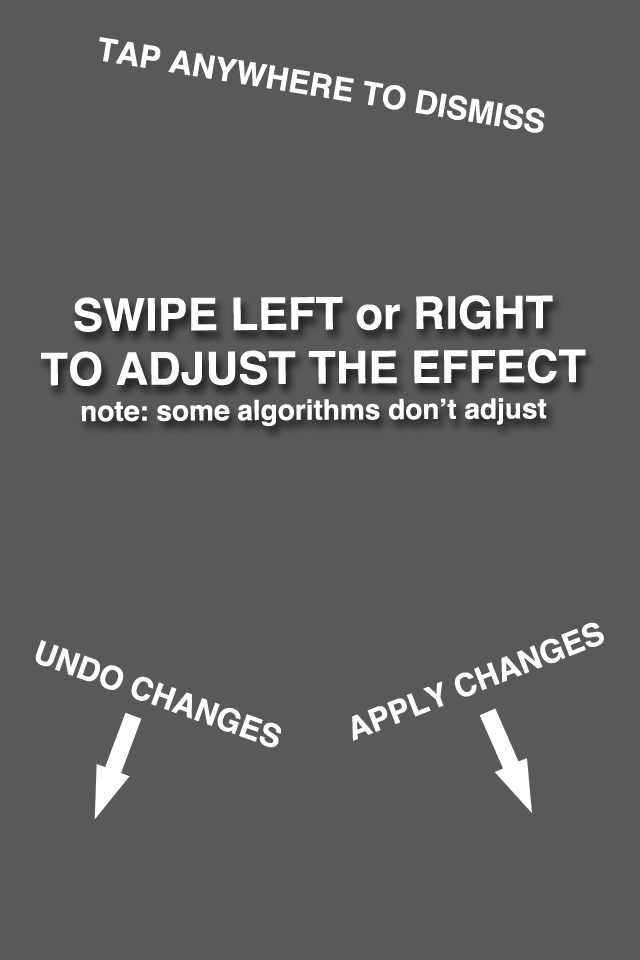
<style>
.page{position:relative;width:640px;height:960px;background:#595959}
.page>*{position:absolute;margin:0}
.t1{font:32px "Helvetica-Bold";color:#ffffff}
.t2{font:45px "Helvetica-Bold";color:#ffffff}
.t3{font:28px/36px "Helvetica-Bold";color:#ffffff}
.t4{font:31.7px "Helvetica-Bold";color:#ffffff}
</style>
<div class="page">
<p class="t1" style="left:99px;top:37px;width:446px;height:96px;rotate:9deg">TAP ANYWHERE TO DISMISS</p>
<p class="t2" style="left:41px;top:295px;width:545px;height:132px;text-align:center">SWIPE LEFT or RIGHT<br>TO ADJUST THE EFFECT<br><span class="t3">note: some algorithms don’t adjust</span></p>
<p class="t4" style="left:352px;top:622px;width:252px;height:119px;rotate:-21deg">APPLY CHANGES</p>
<p class="t4" style="left:35px;top:640px;width:246px;height:108px;rotate:20deg">UNDO CHANGES</p>
</div>
